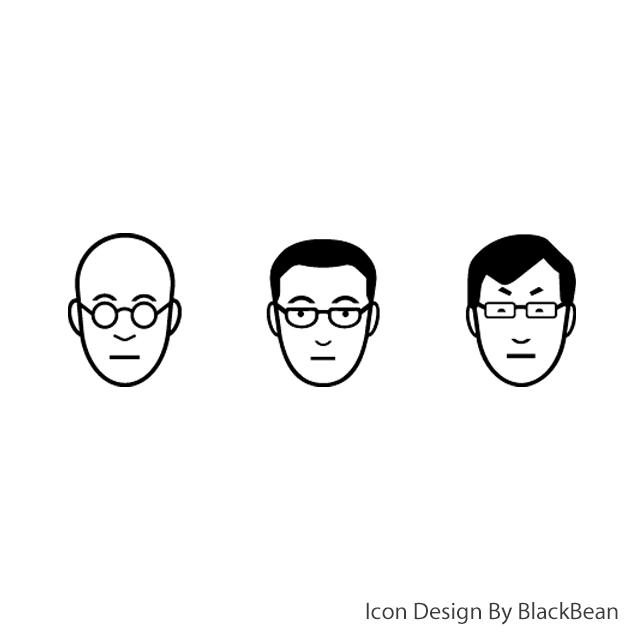
<style>
.page{position:relative;width:640px;height:640px;background:#ffffff}
.page>*{position:absolute;margin:0}
.t1{font:24px "MyriadPro-Regular";color:#3b3b3b}
</style>
<div class="page">
<p class="t1" style="left:366px;top:602px;width:252px;height:23px">Icon Design By BlackBean</p>
</div>
